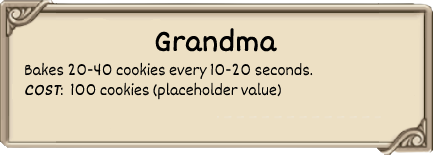
<style>
.page{position:relative;width:433px;height:155px;background:#ede0c4}
.page>*{position:absolute;margin:0}
.t1{font:32px "Dekko";color:#000000;font-weight:bold}
.t2{font:17px "Dekko";color:#000000}
.t3{font:17px "Dekko";color:#000000;font-weight:bold;font-style:italic}
</style>
<div class="page">
<p class="t1" style="left:155px;top:28px;width:122px;height:24px">Grandma</p>
<p class="t2" style="left:24px;top:62px;width:289px;height:38px">Bakes 20-40 cookies every 10-20 seconds.<br><span class="t3">COST</span>:  100 cookies (placeholder value)</p>
</div>
